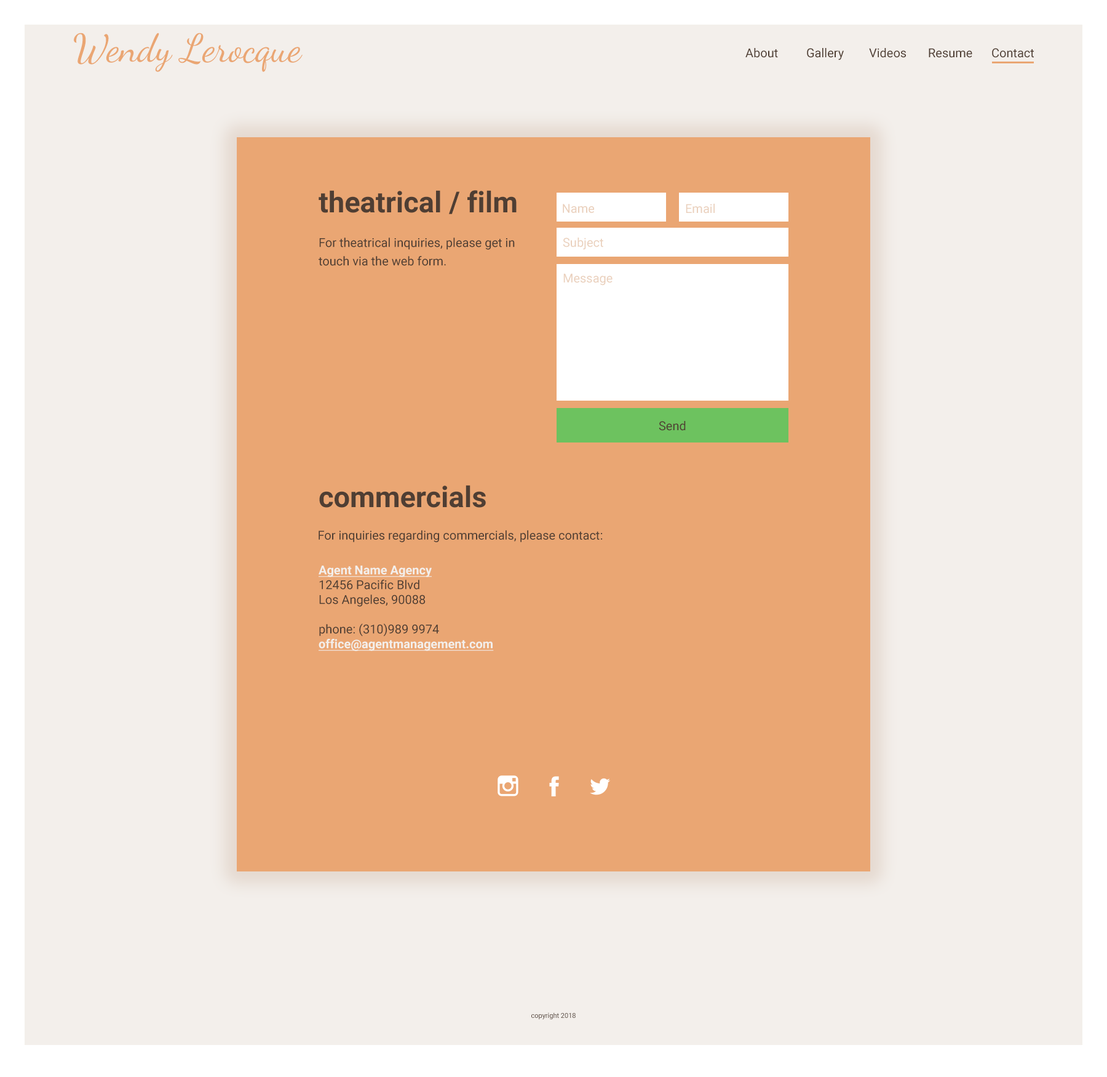
<style>
.page{position:relative;width:1107px;height:1077px;background:#f3efeb}
.page>*{position:absolute;margin:0}
.t1{font:38.8px "DancingScript-Regular";color:#eaa673}
.t2{font:12.3px "Roboto-Regular";color:#4f3e33}
.t3{font:28.9px "Roboto-Bold";color:#4f3e33}
.t4{font:12.3px "Roboto-Regular";color:#ead0bc}
.t5{font:12.3px/18.5px "Roboto-Regular";color:#4f3e33}
.t6{font:12.3px "Roboto-Bold";color:#f3efeb;text-decoration:underline}
.t7{font:6.8px "Roboto-Regular";color:#4f3e33}
</style>
<div class="page">
<p class="t1" style="left:74px;top:33px;width:229px;height:39px">Wendy Lerocque</p>
<p class="t2" style="left:746px;top:48px;width:32px;height:10px">About</p>
<p class="t2" style="left:807px;top:48px;width:37px;height:12px">Gallery</p>
<p class="t2" style="left:869px;top:48px;width:37px;height:10px">Videos</p>
<p class="t2" style="left:929px;top:48px;width:44px;height:10px">Resume</p>
<p class="t2" style="left:992px;top:48px;width:42px;height:10px">Contact</p>
<p class="t3" style="left:319px;top:190px;width:198px;height:24px">theatrical / film</p>
<p class="t4" style="left:563px;top:204px;width:31px;height:9px">Name</p>
<p class="t4" style="left:686px;top:204px;width:29px;height:9px">Email</p>
<p class="t5" style="left:319px;top:237px;width:196px;height:29px">For theatrical inquiries, please get in touch via the web form.</p>
<p class="t4" style="left:563px;top:237px;width:41px;height:13px">Subject</p>
<p class="t4" style="left:564px;top:273px;width:49px;height:12px">Message</p>
<p class="t2" style="left:659px;top:421px;width:27px;height:10px">Send</p>
<p class="t3" style="left:319px;top:485px;width:167px;height:23px">commercials</p>
<p class="t2" style="left:319px;top:530px;width:284px;height:12px">For inquiries regarding commercials, please contact:</p>
<p class="t2" style="left:319px;top:565px;width:175px;height:86px"><span class="t6">Agent Name Agency<br></span>12456 Pacific Blvd<br>Los Angeles, 90088<br><br>phone: (310)989 9974<br><span class="t6">office@agentmanagement.com</span></p>
<p class="t7" style="left:532px;top:1012px;width:44px;height:7px">copyright 2018</p>
</div>
